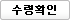
<style>
.page{position:relative;width:70px;height:20px;background:#ffffff}
.page>*{position:absolute;margin:0}
.t1{font:12px "morris9";color:#000000;font-weight:bold;scale:0.96 1}
</style>
<div class="page">
<p class="t1" style="left:12px;top:5px;width:44px;height:10px">수령확인</p>
</div>
